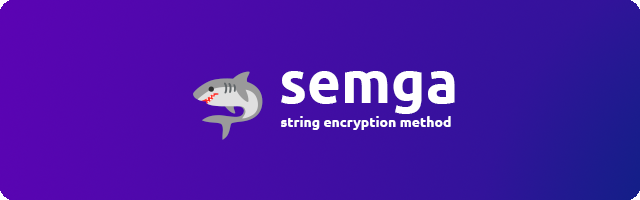
<style>
.page{position:relative;width:640px;height:200px}
.page>*{position:absolute;margin:0}
.t1{font:58.2px "Ubuntu-Bold";color:#ffffff}
.t2{font:14px "Ubuntu-Bold";color:#ffffff}
</style>
<div class="page">
<p class="t1" style="left:281px;top:71px;width:174px;height:43px">semga</p>
<p class="t2" style="left:281px;top:116px;width:170px;height:14px">string encryption method</p>
</div>
